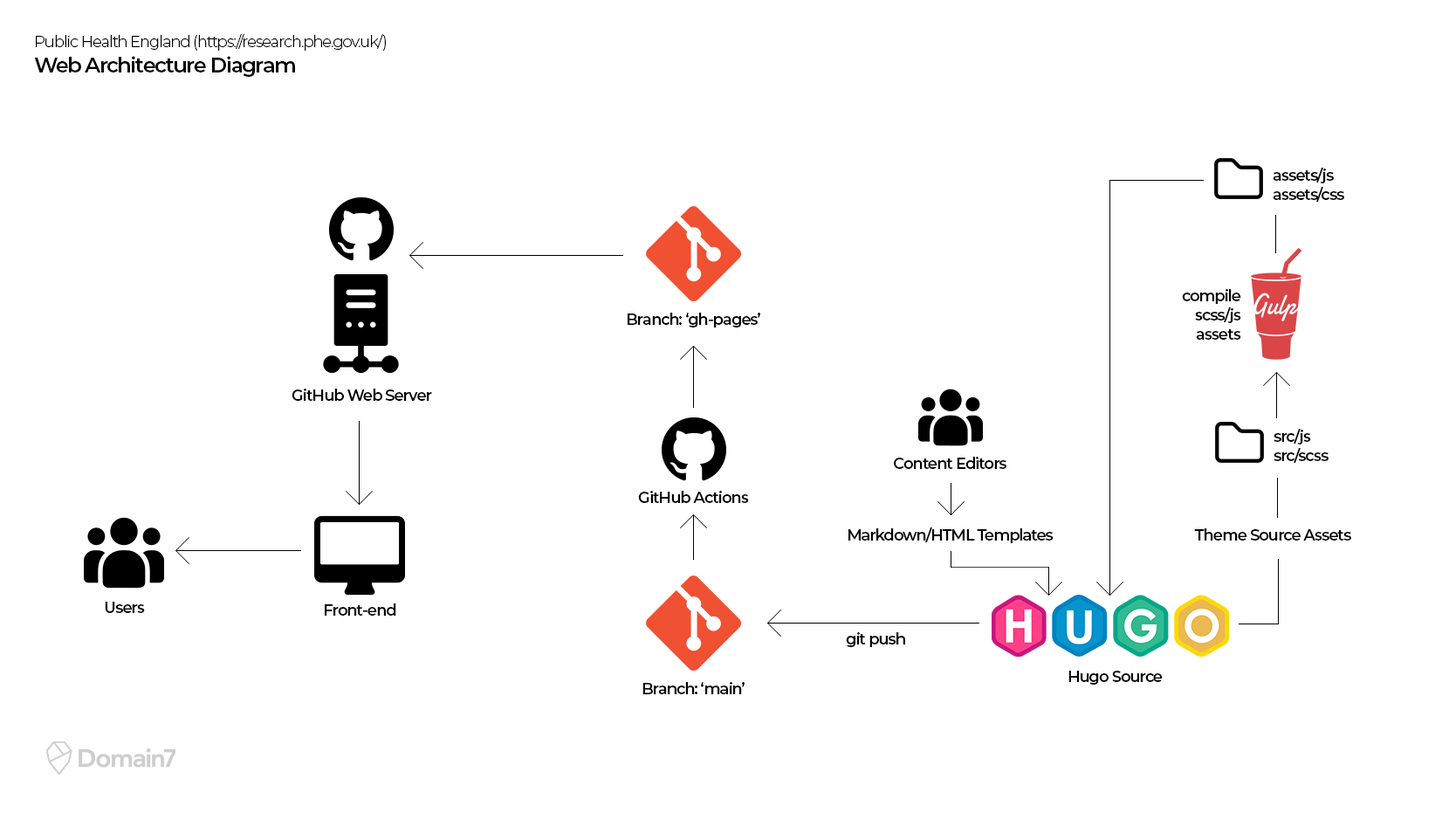
<style>
.page{position:relative;width:1442px;height:827px;background:#ffffff}
.page>*{position:absolute;margin:0}
.t1{font:15.7px "Montserrat-Light";letter-spacing:-0.06em;color:#000000}
.t2{font:21px "Montserrat-SemiBold";letter-spacing:-0.06em;color:#000000}
.t3{font:15.7px "Montserrat-SemiBold";letter-spacing:-0.06em;color:#000000}
</style>
<div class="page">
<p class="t1" style="left:34px;top:34px;width:352px;height:43px">Public Health England (https://research.phe.gov.uk/)<br><span class="t2">Web Architecture Diagram</span></p>
<p class="t3" style="left:1273px;top:168px;width:71px;height:34px">assets/js<br>assets/css</p>
<p class="t3" style="left:1182px;top:289px;width:59px;height:51px;text-align:right">compile <br>scss/js<br>assets</p>
<p class="t3" style="left:628px;top:313px;width:132px;height:14px">Branch: ‘gh-pages’</p>
<p class="t3" style="left:292px;top:389px;width:140px;height:12px">GitHub Web Server</p>
<p class="t3" style="left:1274px;top:429px;width:55px;height:34px">src/js<br>src/scss</p>
<p class="t3" style="left:894px;top:457px;width:113px;height:12px">Content Editors</p>
<p class="t3" style="left:638px;top:491px;width:111px;height:12px">GitHub Actions</p>
<p class="t3" style="left:849px;top:527px;width:205px;height:16px">Markdown/HTML Templates</p>
<p class="t3" style="left:1194px;top:528px;width:157px;height:12px">Theme Source Assets</p>
<p class="t3" style="left:105px;top:602px;width:40px;height:11px">Users</p>
<p class="t3" style="left:325px;top:603px;width:71px;height:12px">Front-end</p>
<p class="t3" style="left:846px;top:632px;width:59px;height:15px">git push</p>
<p class="t3" style="left:1069px;top:670px;width:94px;height:14px">Hugo Source</p>
<p class="t3" style="left:643px;top:682px;width:102px;height:12px">Branch: ‘main’</p>
</div>
